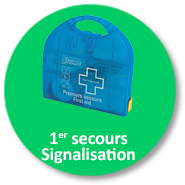
<style>
.page{position:relative;width:185px;height:185px;background:#00cc66}
.page>*{position:absolute;margin:0}
.t1{font:18px/16px "Calibri-Bold";color:#ffffff}
</style>
<div class="page">
<p class="t1" style="left:41px;top:132px;width:94px;height:32px;text-align:center">1er secours  <br>Signalisation</p>
</div>
